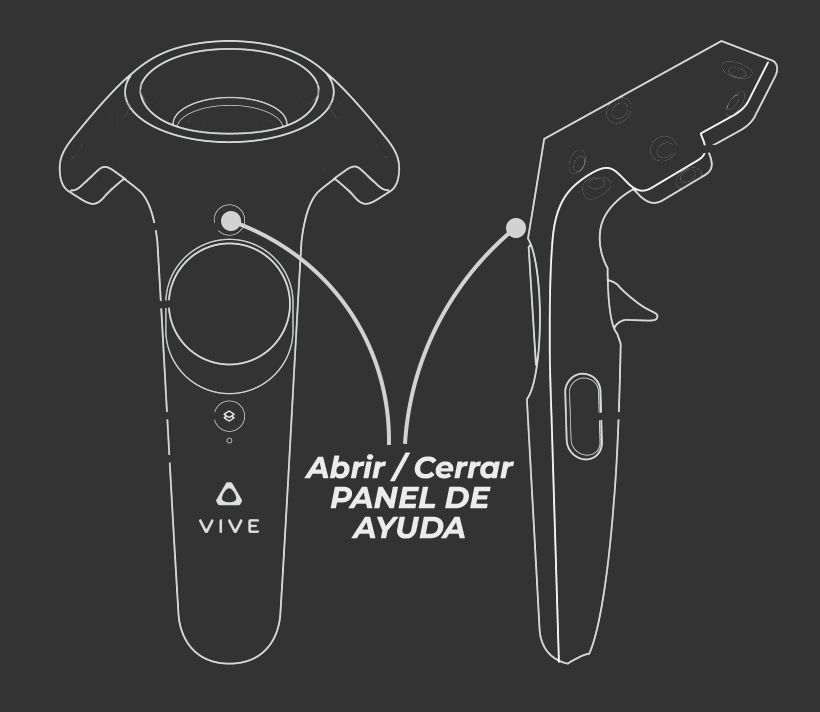
<style>
.page{position:relative;width:820px;height:712px;background:#333333}
.page>*{position:absolute;margin:0}
.t1{font:30px/30px "MontserratItalic-BoldItalic";color:#ececec}
</style>
<div class="page">
<p class="t1" style="left:304px;top:452px;width:210px;height:87px;text-align:center">Abrir / Cerrar<br>PANEL DE<br>AYUDA</p>
</div>
